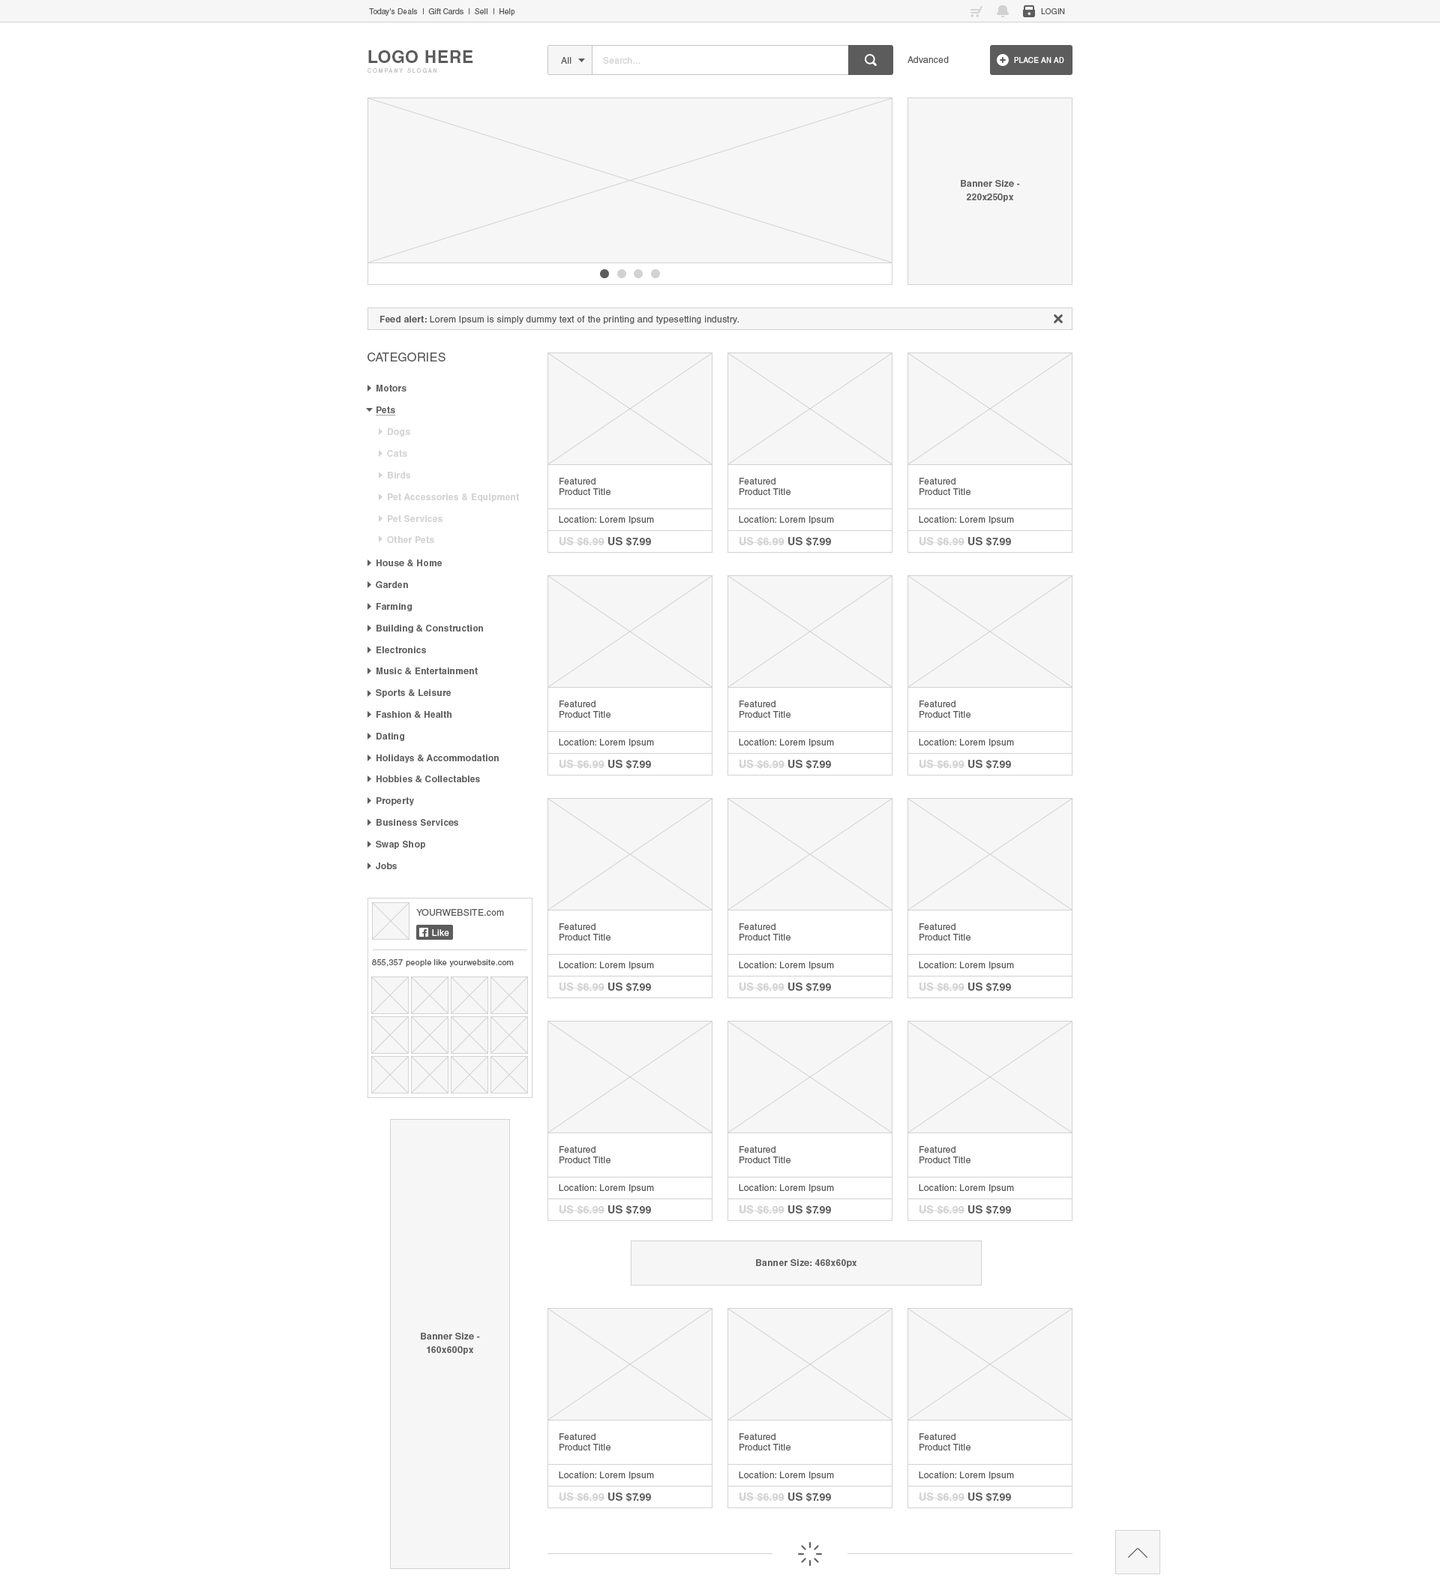
<style>
.page{position:relative;width:1440px;height:1596px;background:#ffffff}
.page>*{position:absolute;margin:0}
.t1{font:7.5px "HelveticaLTStd-Roman";letter-spacing:0.024em;color:#5c5c5c}
.t2{font:7.5px "HelveticaLTStd-Roman";letter-spacing:0.024em;color:#5c5c5c;text-transform:uppercase}
.t3{font:17.2px "HelveticaLTStd-Bold";letter-spacing:0.024em;color:#5c5c5c;text-transform:uppercase}
.t4{font:9px "HelveticaLTStd-Roman";letter-spacing:0.024em;color:#5c5c5c}
.t5{font:9px "HelveticaLTStd-Roman";letter-spacing:0.024em;color:#d2d2d2}
.t6{font:7.5px "HelveticaLTStd-Roman";letter-spacing:0.024em;color:#ffffff;text-transform:uppercase}
.t7{font:5.2px "HelveticaLTStd-Roman";letter-spacing:0.3em;color:#c5c5c5;text-transform:uppercase}
.t8{font:9px/13.5px "HelveticaLTStd-Bold";letter-spacing:0.024em;color:#5c5c5c}
.t9{font:9px "HelveticaLTStd-Bold";letter-spacing:0.024em;color:#5c5c5c}
.t10{font:12px "HelveticaLTStd-Roman";letter-spacing:0.024em;color:#5c5c5c;text-transform:uppercase}
.t11{font:9px "HelveticaLTStd-Bold";letter-spacing:0.024em;color:#5c5c5c;text-decoration:underline}
.t12{font:9px "HelveticaLTStd-Bold";letter-spacing:0.024em;color:#d2d2d2}
.t13{font:10.5px "HelveticaLTStd-Bold";letter-spacing:0.024em;color:#d2d2d2}
.t14{font:10.5px "HelveticaLTStd-Bold";letter-spacing:0.024em;color:#5c5c5c}
.t15{font:9px "HelveticaLTStd-Roman";letter-spacing:0.024em;color:#5c5c5c;text-transform:uppercase}
.t16{font:9px "HelveticaLTStd-Roman";letter-spacing:0.024em;color:#ffffff}
.t17{font:8.2px "HelveticaLTStd-Roman";letter-spacing:0.024em;color:#5c5c5c}
</style>
<div class="page">
<p class="t1" style="left:369px;top:8px;width:146px;height:8px">Today's Deals  |  Gift Cards  |  Sell  |  Help</p>
<p class="t2" style="left:1041px;top:8px;width:24px;height:6px">login</p>
<p class="t3" style="left:368px;top:50px;width:105px;height:13px">Logo Here</p>
<p class="t4" style="left:561px;top:57px;width:11px;height:7px">All</p>
<p class="t5" style="left:603px;top:57px;width:37px;height:7px">Search...</p>
<p class="t4" style="left:908px;top:56px;width:41px;height:7px">Advanced</p>
<p class="t6" style="left:1014px;top:57px;width:50px;height:6px">Place an ad</p>
<p class="t7" style="left:368px;top:68px;width:69px;height:5px">Company Slogan</p>
<p class="t8" style="left:961px;top:180px;width:59px;height:22px;text-align:center">Banner Size -<br>220x250px</p>
<p class="t4" style="left:380px;top:316px;width:359px;height:9px"><span class="t9">Feed alert: </span>Lorem Ipsum is simply dummy text of the printing and typesetting industry.</p>
<p class="t10" style="left:368px;top:352px;width:78px;height:10px">Categories</p>
<p class="t9" style="left:376px;top:385px;width:30px;height:31px">Motors<br><br><span class="t11">Pets</span></p>
<p class="t12" style="left:387px;top:428px;width:132px;height:115px">Dogs<br><br>Cats<br><br>Birds<br><br>Pet Accessories &amp; Equipment<br><br>Pet Services <br><br>Other Pets</p>
<p class="t4" style="left:560px;top:478px;width:50px;height:17px">Featured<br>Product Title</p>
<p class="t4" style="left:740px;top:478px;width:50px;height:17px">Featured<br>Product Title</p>
<p class="t4" style="left:920px;top:478px;width:50px;height:17px">Featured<br>Product Title</p>
<p class="t4" style="left:559px;top:516px;width:95px;height:8px">Location: Lorem Ipsum</p>
<p class="t4" style="left:739px;top:516px;width:95px;height:8px">Location: Lorem Ipsum</p>
<p class="t4" style="left:919px;top:516px;width:95px;height:8px">Location: Lorem Ipsum</p>
<p class="t13" style="left:559px;top:537px;width:92px;height:10px">US $6.99 <span class="t14">US $7.99</span></p>
<p class="t13" style="left:739px;top:537px;width:92px;height:10px">US $6.99 <span class="t14">US $7.99</span></p>
<p class="t13" style="left:919px;top:537px;width:92px;height:10px">US $6.99 <span class="t14">US $7.99</span></p>
<p class="t9" style="left:376px;top:560px;width:123px;height:309px">House &amp; Home<br><br>Garden<br><br>Farming<br><br>Building &amp; Construction<br><br>Electronics<br><br>Music &amp; Entertainment<br><br>Sports &amp; Leisure<br><br>Fashion &amp; Health<br><br>Dating<br><br>Holidays &amp; Accommodation<br><br>Hobbies &amp; Collectables<br><br>Property<br><br>Business Services<br><br>Swap Shop<br><br>Jobs</p>
<p class="t4" style="left:560px;top:700px;width:50px;height:18px">Featured<br>Product Title</p>
<p class="t4" style="left:740px;top:700px;width:50px;height:18px">Featured<br>Product Title</p>
<p class="t4" style="left:920px;top:700px;width:50px;height:18px">Featured<br>Product Title</p>
<p class="t4" style="left:559px;top:739px;width:95px;height:8px">Location: Lorem Ipsum</p>
<p class="t4" style="left:739px;top:739px;width:95px;height:8px">Location: Lorem Ipsum</p>
<p class="t4" style="left:919px;top:739px;width:95px;height:8px">Location: Lorem Ipsum</p>
<p class="t13" style="left:559px;top:760px;width:92px;height:10px">US $6.99 <span class="t14">US $7.99</span></p>
<p class="t13" style="left:739px;top:760px;width:92px;height:10px">US $6.99 <span class="t14">US $7.99</span></p>
<p class="t13" style="left:919px;top:760px;width:92px;height:10px">US $6.99 <span class="t14">US $7.99</span></p>
<p class="t15" style="left:416px;top:909px;width:88px;height:7px">Yourwebsite.<span class="t4">com</span></p>
<p class="t16" style="left:432px;top:929px;width:17px;height:7px">Like</p>
<p class="t4" style="left:560px;top:923px;width:50px;height:17px">Featured<br>Product Title</p>
<p class="t4" style="left:740px;top:923px;width:50px;height:17px">Featured<br>Product Title</p>
<p class="t4" style="left:920px;top:923px;width:50px;height:17px">Featured<br>Product Title</p>
<p class="t17" style="left:372px;top:959px;width:142px;height:8px">855,357 people like yourwebsite.com</p>
<p class="t4" style="left:559px;top:962px;width:95px;height:8px">Location: Lorem Ipsum</p>
<p class="t4" style="left:739px;top:962px;width:95px;height:8px">Location: Lorem Ipsum</p>
<p class="t4" style="left:919px;top:962px;width:95px;height:8px">Location: Lorem Ipsum</p>
<p class="t13" style="left:559px;top:982px;width:92px;height:10px">US $6.99 <span class="t14">US $7.99</span></p>
<p class="t13" style="left:739px;top:982px;width:92px;height:10px">US $6.99 <span class="t14">US $7.99</span></p>
<p class="t13" style="left:919px;top:982px;width:92px;height:10px">US $6.99 <span class="t14">US $7.99</span></p>
<p class="t4" style="left:560px;top:1146px;width:50px;height:17px">Featured<br>Product Title</p>
<p class="t4" style="left:740px;top:1146px;width:50px;height:17px">Featured<br>Product Title</p>
<p class="t4" style="left:920px;top:1146px;width:50px;height:17px">Featured<br>Product Title</p>
<p class="t4" style="left:559px;top:1184px;width:95px;height:8px">Location: Lorem Ipsum</p>
<p class="t4" style="left:739px;top:1184px;width:95px;height:8px">Location: Lorem Ipsum</p>
<p class="t4" style="left:919px;top:1184px;width:95px;height:8px">Location: Lorem Ipsum</p>
<p class="t13" style="left:559px;top:1205px;width:92px;height:10px">US $6.99 <span class="t14">US $7.99</span></p>
<p class="t13" style="left:739px;top:1205px;width:92px;height:10px">US $6.99 <span class="t14">US $7.99</span></p>
<p class="t13" style="left:919px;top:1205px;width:92px;height:10px">US $6.99 <span class="t14">US $7.99</span></p>
<p class="t9" style="left:756px;top:1259px;width:101px;height:9px">Banner Size: 468x60px</p>
<p class="t8" style="left:421px;top:1333px;width:59px;height:21px;text-align:center">Banner Size -<br>160x600px</p>
<p class="t4" style="left:560px;top:1433px;width:50px;height:17px">Featured<br>Product Title</p>
<p class="t4" style="left:740px;top:1433px;width:50px;height:17px">Featured<br>Product Title</p>
<p class="t4" style="left:920px;top:1433px;width:50px;height:17px">Featured<br>Product Title</p>
<p class="t4" style="left:559px;top:1472px;width:95px;height:8px">Location: Lorem Ipsum</p>
<p class="t4" style="left:739px;top:1472px;width:95px;height:8px">Location: Lorem Ipsum</p>
<p class="t4" style="left:919px;top:1472px;width:95px;height:8px">Location: Lorem Ipsum</p>
<p class="t13" style="left:559px;top:1492px;width:92px;height:10px">US $6.99 <span class="t14">US $7.99</span></p>
<p class="t13" style="left:739px;top:1492px;width:92px;height:10px">US $6.99 <span class="t14">US $7.99</span></p>
<p class="t13" style="left:919px;top:1492px;width:92px;height:10px">US $6.99 <span class="t14">US $7.99</span></p>
</div>
